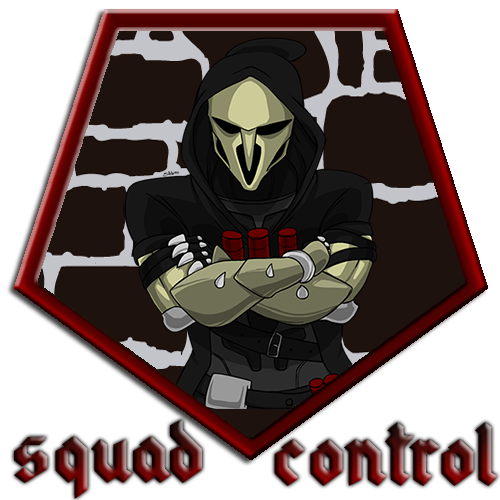
<style>
.page{position:relative;width:500px;height:500px;background:#ffffff}
.page>*{position:absolute;margin:0}
.t1{font:89.4px "gothicmodern"}
.t2{font:89px "gothicmodern"}
</style>
<div class="page">
<p class="t1" style="left:14px;top:419px;width:188px;height:80px">squad</p>
<p class="t2" style="left:274px;top:422px;width:224px;height:64px">control</p>
</div>
